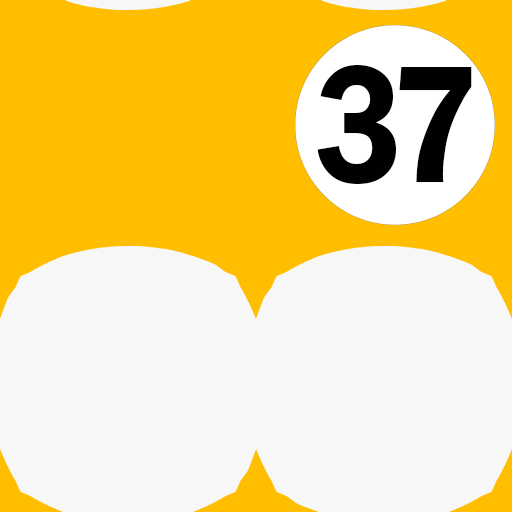
<style>
.page{position:relative;width:512px;height:512px;background:#f7f7f7}
.page>*{position:absolute;margin:0}
.t1{font:172.5px "FranklinGothic-Demi";letter-spacing:-0.05em;color:#010101;scale:0.87 1}
</style>
<div class="page">
<p class="t1" style="left:317px;top:65px;width:155px;height:119px">37</p>
</div>
